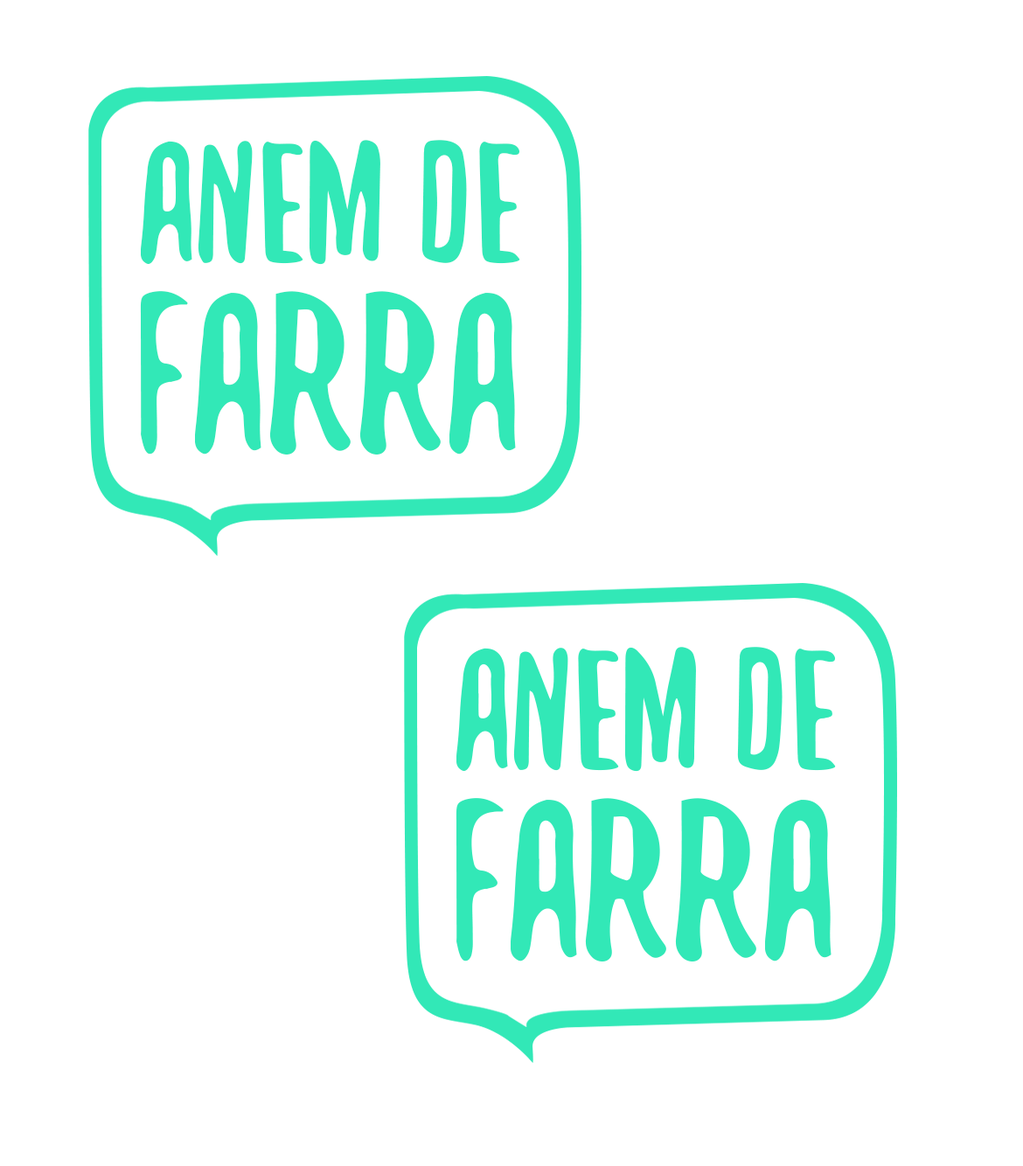
<style>
.page{position:relative;width:1023px;height:1166px;background:#ffffff}
.page>*{position:absolute;margin:0}
.t1{font:188.5px "YeahPapa";color:#32e8b7;text-transform:uppercase}
.t2{font:188.5px "YeahPapa";color:#32e8b7}
.t3{font:248.2px "YeahPapa";color:#32e8b7;text-transform:uppercase}
</style>
<div class="page">
<p class="t1" style="left:141px;top:140px;width:379px;height:125px"><span class="t2">a</span>nem de</p>
<p class="t3" style="left:140px;top:291px;width:376px;height:164px">farra</p>
</div>
